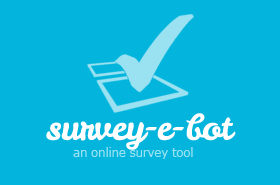
<style>
.page{position:relative;width:280px;height:185px;background:#03b5dc}
.page>*{position:absolute;margin:0}
.t1{font:36px "LeckerliOne-Regular";letter-spacing:-0.025em;color:#ffffff}
.t2{font:12px "Verdana";letter-spacing:-0.025em;color:#9ae1f1}
</style>
<div class="page">
<p class="t1" style="left:46px;top:113px;width:190px;height:37px">survey-e-bot</p>
<p class="t2" style="left:73px;top:147px;width:120px;height:12px">an online survey tool</p>
</div>
